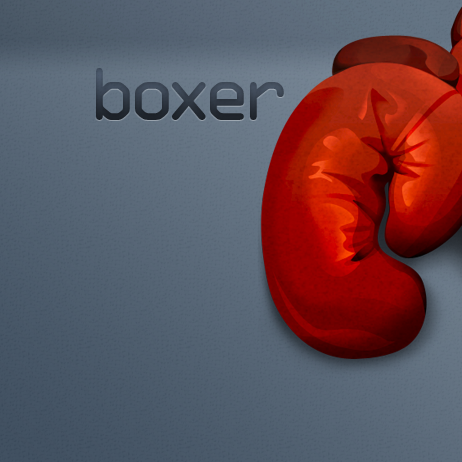
<style>
.page{position:relative;width:462px;height:462px}
.page>*{position:absolute;margin:0}
.t1{font:71.4px "OCRAStd";letter-spacing:-0.19em}
.t2{font:71.4px "OCRAStd";letter-spacing:-0.18em}
.t3{font:71.4px "OCRAStd";letter-spacing:-0.16em}
</style>
<div class="page">
<p class="t1" style="left:96px;top:68px;width:188px;height:52px"><span class="t2">b</span>ox<span class="t3">e</span><span class="t2">r</span></p>
</div>
